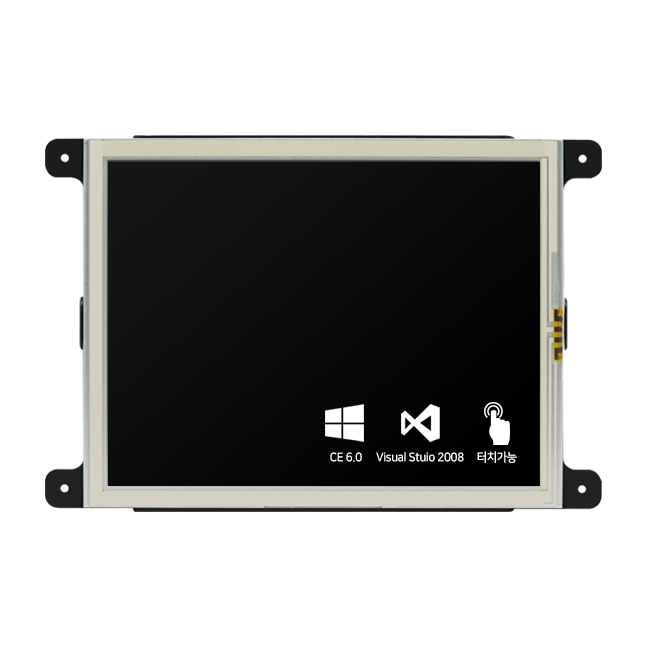
<style>
.page{position:relative;width:650px;height:650px;background:#ffffff}
.page>*{position:absolute;margin:0}
.t1{font:12px "NanumSquareB";letter-spacing:-0.03em;color:#ffffff;scale:0.95 1}
</style>
<div class="page">
<p class="t1" style="left:330px;top:452px;width:32px;height:10px">CE 6.0</p>
<p class="t1" style="left:376px;top:452px;width:88px;height:10px">Visual Stuio 2008</p>
<p class="t1" style="left:477px;top:451px;width:40px;height:12px">터치가능</p>
</div>
